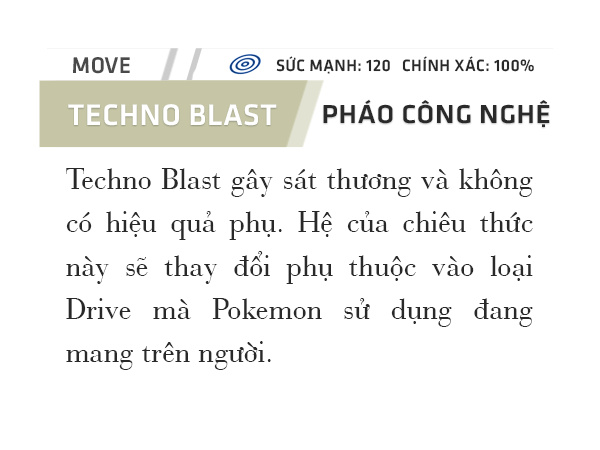
<style>
.page{position:relative;width:600px;height:450px;background:#ffffff}
.page>*{position:absolute;margin:0}
.t1{font:23.6px "UTM-Facebook-K&T";letter-spacing:0.02em;color:#4a4a4a}
.t2{font:17px "UTM-Facebook-K&T";letter-spacing:0.02em;color:#292929}
.t3{font:26.9px "UTM-Facebook-K&T";letter-spacing:0.02em;color:#2a2a2a;scale:1.06 1}
.t4{font:30.9px "UTM-Facebook-K&T";letter-spacing:0.02em;color:#ffffff}
.t5{font:30.9px/43.3px "UVNBachDang";letter-spacing:0.02em;color:#292929}
</style>
<div class="page">
<p class="t1" style="left:73px;top:57px;width:57px;height:17px">MOVE</p>
<p class="t2" style="left:276px;top:56px;width:114px;height:18px">SỨC MẠNH: 120</p>
<p class="t2" style="left:402px;top:56px;width:132px;height:16px">CHÍNH XÁC: 100%</p>
<p class="t3" style="left:323px;top:99px;width:227px;height:28px">PHÁO CÔNG NGHỆ</p>
<p class="t4" style="left:68px;top:104px;width:209px;height:22px">TECHNO BLAST</p>
<p class="t5" style="left:66px;top:168px;width:467px;height:202px;text-align:justify">Techno Blast gây sát thương và không có hiệu quả phụ. Hệ của chiêu thức này sẽ thay đổi phụ thuộc vào loại Drive mà Pokemon sử dụng đang mang trên người.</p>
</div>
